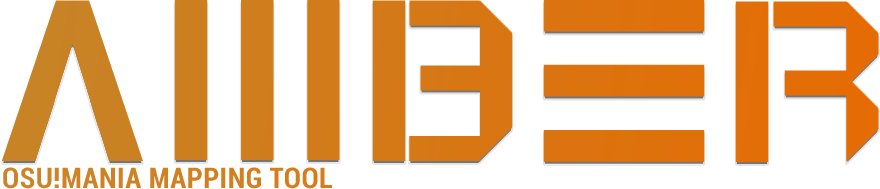
<style>
.page{position:relative;width:880px;height:189px;background:#ffffff}
.page>*{position:absolute;margin:0}
.t1{font:225.5px "Roboto-Bold";color:#c1882d;text-transform:uppercase}
.t2{font:225.5px "Roboto-Bold";letter-spacing:0.38em;color:#d87714;text-transform:uppercase}
.t3{font:225.5px "Roboto-Bold";color:#dd720d;text-transform:uppercase}
.t4{font:225.5px "Roboto-Bold";color:#e26e08;text-transform:uppercase}
.t5{font:225.5px "Roboto-Bold";color:#e56d06;text-transform:uppercase}
.t6{font:28.5px "Roboto-BoldCondensed";letter-spacing:0.02em;color:#c48a30;text-transform:uppercase}
</style>
<div class="page">
<p class="t1" style="left:1px;top:0px;width:142px;height:161px">A</p>
<p class="t1" style="left:174px;top:0px;width:166px;height:160px">iii</p>
<p class="t1" style="left:372px;top:0px;width:34px;height:161px">i</p>
<p class="t2" style="left:409px;top:0px;width:104px;height:161px;rotate:180deg">E</p>
<p class="t3" style="left:543px;top:0px;width:162px;height:162px;rotate:-90deg">iii</p>
<p class="t4" style="left:735px;top:1px;width:34px;height:161px">i</p>
<p class="t5" style="left:773px;top:1px;width:106px;height:161px;rotate:180deg">F</p>
<p class="t6" style="left:3px;top:167px;width:329px;height:22px">osu!mania mapping Tool</p>
</div>
